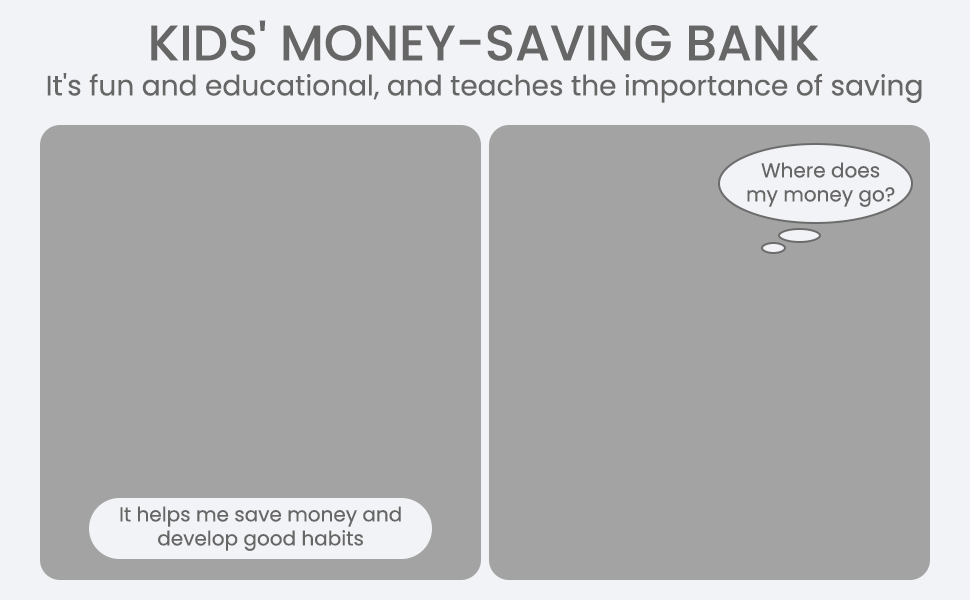
<style>
.page{position:relative;width:970px;height:600px;background:#a3a3a3}
.page>*{position:absolute;margin:0}
.t1{font:50px "Poppins-Medium";color:#666666;text-transform:uppercase}
.t2{font:28px "Poppins-Regular";color:#666666}
.t3{font:20px "Poppins-Regular";color:#666666}
</style>
<div class="page">
<p class="t1" style="left:151px;top:20px;width:668px;height:41px">Kids' money-saving bank</p>
<p class="t2" style="left:47px;top:73px;width:875px;height:30px">It's fun and educational, and teaches the importance of saving</p>
<p class="t3" style="left:747px;top:162px;width:148px;height:45px;text-align:center">Where does<br>my money go?</p>
<p class="t3" style="left:120px;top:506px;width:281px;height:45px;text-align:center">It helps me save money and<br>develop good habits</p>
</div>
